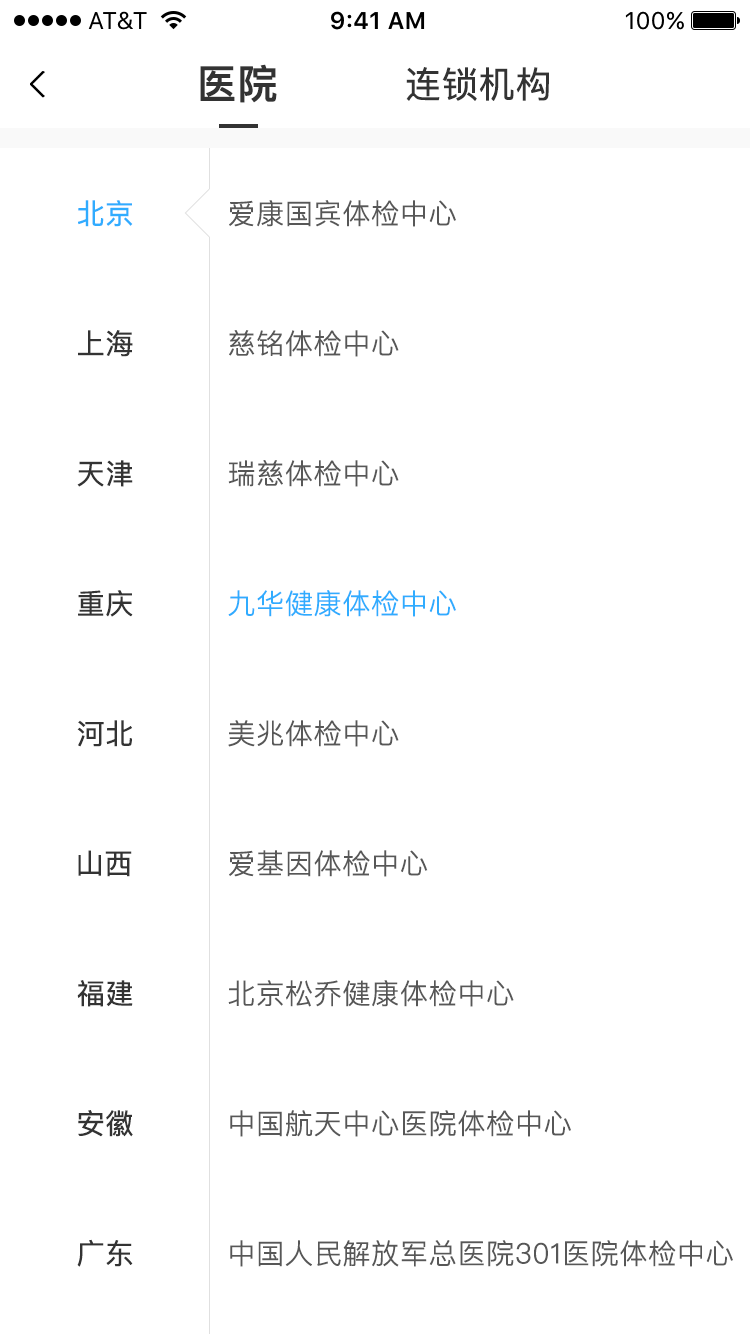
<style>
.page{position:relative;width:750px;height:1334px;background:#ffffff}
.page>*{position:absolute;margin:0}
.t1{font:40px "PingFangSC-Medium";color:#333333;font-weight:bold}
.t2{font:36px "PingFangSC-Regular";color:#333333;font-weight:bold}
.t3{font:28px "PingFangSC-Regular";color:#30acff;font-weight:bold}
.t4{font:28px "PingFangSC-Light";color:#575757;font-weight:bold}
.t5{font:28px "PingFangSC-Regular";color:#333333;font-weight:bold}
.t6{font:28px "PingFangSC-Light";color:#30acff;font-weight:bold}
</style>
<div class="page">
<p class="t1" style="left:200px;top:64px;width:77px;height:39px">医院</p>
<p class="t2" style="left:406px;top:67px;width:143px;height:34px">连锁机构</p>
<p class="t3" style="left:78px;top:200px;width:55px;height:27px">北京</p>
<p class="t4" style="left:229px;top:200px;width:227px;height:27px">爱康国宾体检中心</p>
<p class="t5" style="left:78px;top:330px;width:55px;height:27px">上海</p>
<p class="t4" style="left:229px;top:330px;width:170px;height:27px">慈铭体检中心</p>
<p class="t5" style="left:77px;top:460px;width:56px;height:27px">天津</p>
<p class="t4" style="left:228px;top:460px;width:171px;height:27px">瑞慈体检中心</p>
<p class="t5" style="left:78px;top:590px;width:55px;height:27px">重庆</p>
<p class="t6" style="left:228px;top:590px;width:228px;height:27px">九华健康体检中心</p>
<p class="t5" style="left:77px;top:720px;width:55px;height:27px">河北</p>
<p class="t4" style="left:228px;top:720px;width:171px;height:27px">美兆体检中心</p>
<p class="t5" style="left:78px;top:850px;width:54px;height:27px">山西</p>
<p class="t4" style="left:229px;top:850px;width:199px;height:27px">爱基因体检中心</p>
<p class="t5" style="left:77px;top:980px;width:56px;height:27px">福建</p>
<p class="t4" style="left:228px;top:980px;width:286px;height:27px">北京松乔健康体检中心</p>
<p class="t5" style="left:78px;top:1110px;width:55px;height:27px">安徽</p>
<p class="t4" style="left:230px;top:1110px;width:341px;height:27px">中国航天中心医院体检中心</p>
<p class="t5" style="left:77px;top:1239px;width:56px;height:28px">广东</p>
<p class="t4" style="left:230px;top:1240px;width:503px;height:27px">中国人民解放军总医院301医院体检中心</p>
</div>
